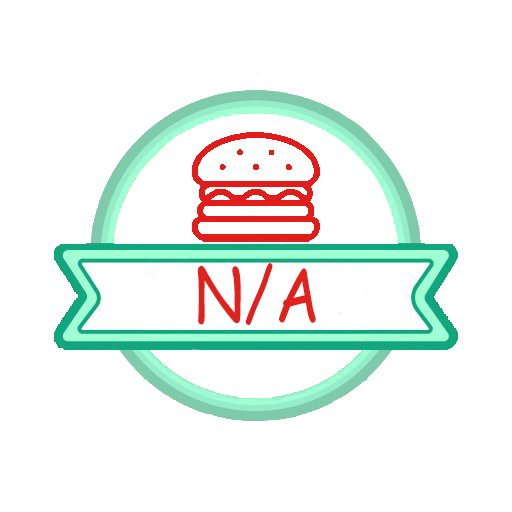
<style>
.page{position:relative;width:512px;height:512px;background:#ffffff}
.page>*{position:absolute;margin:0}
.t1{font:74px "ComicSansMS";color:#e1221c;scale:0.83 1}
</style>
<div class="page">
<p class="t1" style="left:197px;top:263px;width:119px;height:62px">N/A</p>
</div>
